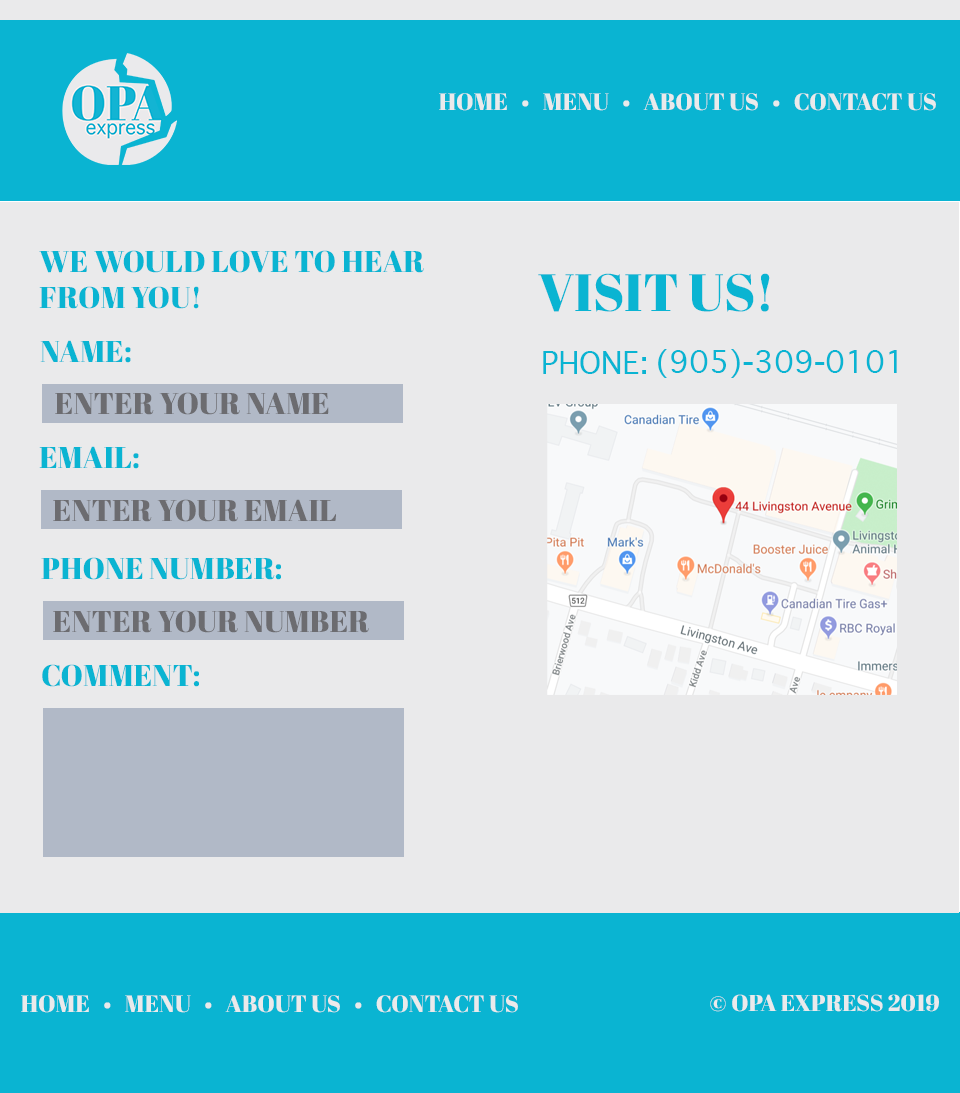
<style>
.page{position:relative;width:960px;height:1093px;background:#eaeaeb}
.page>*{position:absolute;margin:0}
.t1{font:23.5px "AbrilFatface-Regular";color:#eaeaeb;text-transform:uppercase}
.t2{font:30px "AbrilFatface-Regular";color:#0ab4d2;text-transform:uppercase}
.t3{font:52.6px "AbrilFatface-Regular";color:#0ab4d2;text-transform:uppercase}
.t4{font:30px "Geneva";color:#0ab4d2;text-transform:uppercase}
.t5{font:30px "Geneva";color:#0ab4d2}
.t6{font:30px "AbrilFatface-Regular";color:#6c6c70;text-transform:uppercase}
.t7{font:23.1px "AbrilFatface-Regular";color:#eaeaec;text-transform:uppercase}
</style>
<div class="page">
<p class="t1" style="left:439px;top:93px;width:497px;height:18px">home   •   menu   •   about us   •   contact us</p>
<p class="t2" style="left:39px;top:250px;width:385px;height:59px">We would love to hear<br>from you!</p>
<p class="t3" style="left:538px;top:273px;width:232px;height:39px">Visit us!</p>
<p class="t2" style="left:40px;top:340px;width:91px;height:23px">Name:</p>
<p class="t4" style="left:543px;top:351px;width:103px;height:23px">Phone:</p>
<p class="t5" style="left:658px;top:349px;width:239px;height:29px">(905)-309-0101</p>
<p class="t6" style="left:55px;top:392px;width:274px;height:23px">enter your name</p>
<p class="t2" style="left:39px;top:446px;width:100px;height:23px">Email:</p>
<p class="t6" style="left:53px;top:499px;width:283px;height:23px">enter your email</p>
<p class="t2" style="left:41px;top:557px;width:240px;height:23px">Phone NUmber:</p>
<p class="t6" style="left:53px;top:610px;width:316px;height:23px">enter your number</p>
<p class="t2" style="left:42px;top:664px;width:157px;height:23px">Comment:</p>
<p class="t1" style="left:21px;top:995px;width:497px;height:18px">home   •   menu   •   about us   •   contact us</p>
<p class="t7" style="left:710px;top:994px;width:229px;height:18px">© Opa express 2019</p>
</div>
